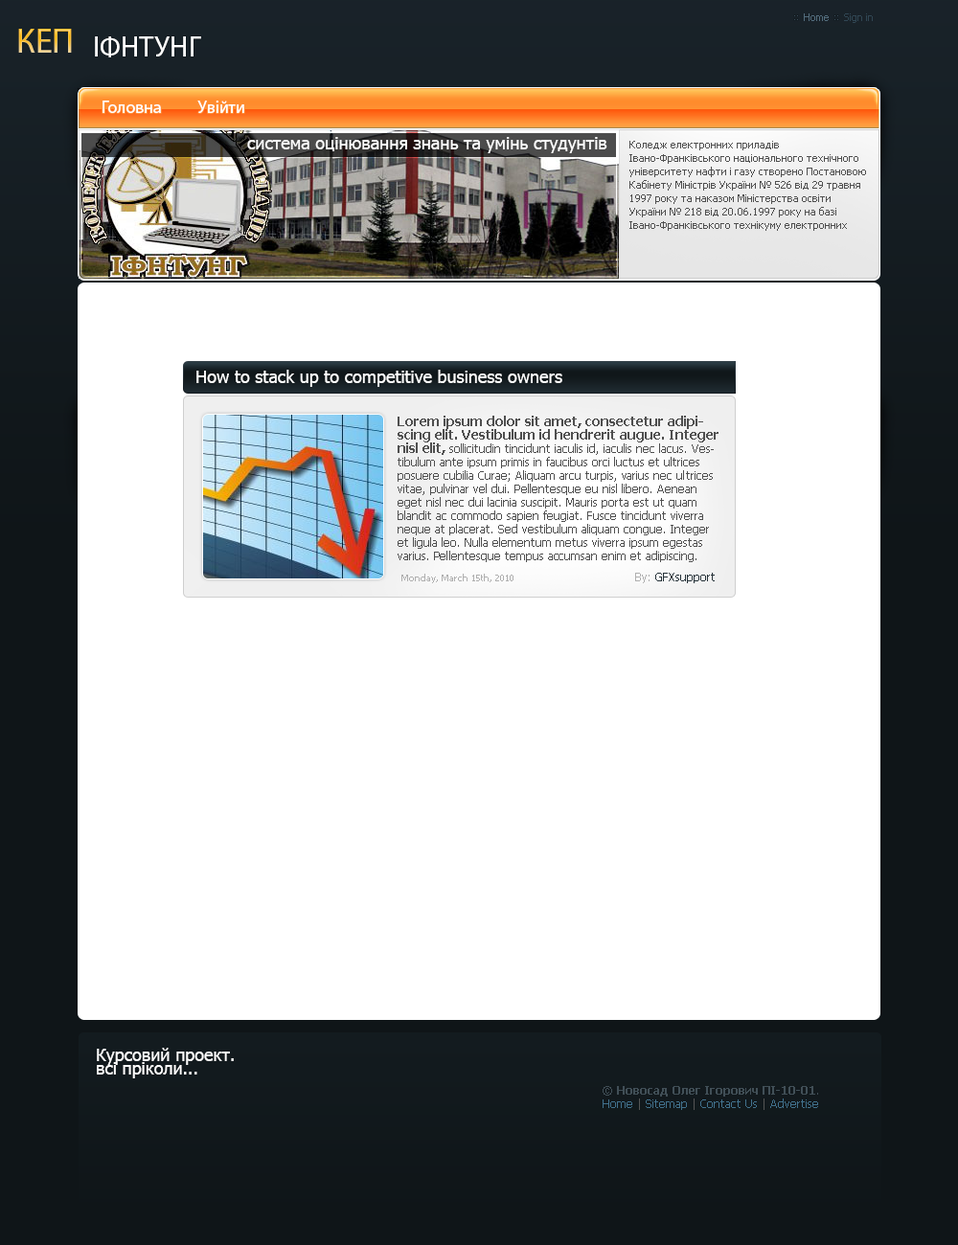
<style>
.page{position:relative;width:958px;height:1245px;background:#ffffff}
.page>*{position:absolute;margin:0}
.t1{font:10.5px "Tahoma";color:#304653}
.t2{font:10.5px "Tahoma";color:#536d7d}
.t3{font:34.5px "MyriadPro-Regular"}
.t4{font:28.7px "MyriadPro-Regular";color:#ffffff}
.t5{font:17.2px "MyriadPro-Regular";color:#ffffff}
.t6{font:17.2px "Tahoma";color:#fefefe}
.t7{font:10.5px/13.4px "Tahoma";color:#4f4f4f}
.t8{font:11.5px/13.4px "Tahoma";color:#4f4f4f}
.t9{font:13.4px/13.4px "Tahoma-Bold";color:#4f4f4f}
.t10{font:9.6px "Tahoma";color:#afafaf}
.t11{font:11.5px "Tahoma";color:#afafaf}
.t12{font:11.5px "Tahoma";color:#253138}
.t13{font:17.2px/13.4px "Tahoma";color:#fefefe}
.t14{font:11.5px/13.4px "Tahoma-Bold";color:#414f57}
.t15{font:11.5px/13.4px "Tahoma";color:#414f57}
.t16{font:11.5px/13.4px "Tahoma";color:#41718d}
.t17{font:11.5px/13.4px "Tahoma";color:#555555}
</style>
<div class="page">
<p class="t1" style="left:804px;top:13px;width:68px;height:10px"><span class="t2">Home</span>     Sign in</p>
<p class="t3" style="left:18px;top:29px;width:54px;height:24px">КЕП</p>
<p class="t4" style="left:95px;top:36px;width:106px;height:21px">ІФНТУНГ</p>
<p class="t5" style="left:102px;top:101px;width:142px;height:12px">Головна          Увійти</p>
<p class="t6" style="left:247px;top:137px;width:360px;height:16px">система оцінювання знань та умінь студунтів</p>
<p class="t7" style="left:629px;top:141px;width:237px;height:90px">Коледж електронних приладів Івано-Франківського національного технічного університету нафти і газу створено Постановою Кабінету Міністрів України № 526 від 29 травня 1997 року та наказом Міністерства освіти України № 218 від 20.06.1997 року на базі Івано-Франківського технікуму електронних приладів, який ліквідовано.</p>
<p class="t6" style="left:196px;top:370px;width:366px;height:17px">How to stack up to competitive business owners</p>
<p class="t8" style="left:397px;top:416px;width:321px;height:146px"><span class="t9">Lorem ipsum dolor sit amet, consectetur adipiscing elit. Vestibulum id hendrerit augue. Integer nisl elit, </span>sollicitudin tincidunt iaculis id, iaculis nec lacus. Vestibulum ante ipsum primis in faucibus orci luctus et ultrices posuere cubilia Curae; Aliquam arcu turpis, varius nec ultrices vitae, pulvinar vel dui. Pellentesque eu nisl libero. Aenean eget nisl nec dui lacinia suscipit. Mauris porta est ut quam blandit ac commodo sapien feugiat. Fusce tincidunt viverra neque at placerat. Sed vestibulum aliquam congue. Integer et ligula leo. Nulla elementum metus viverra ipsum egestas varius. Pellentesque tempus accumsan enim et adipiscing. Phasellus eget lobortis eros. <br><br>egestas lobortis diam, id luctus orci malesuada sed. Suspendisse venenatis tincidunt elit, at viverra justo suscipit vitae.</p>
<p class="t10" style="left:401px;top:573px;width:313px;height:10px">Monday, March 15th, 2010                                          <span class="t11">By: </span><span class="t12">GFXsupport</span></p>
<p class="t13" style="left:97px;top:1048px;width:137px;height:30px">Курсовий проект.<br>всі пріколи...</p>
<p class="t14" style="left:602px;top:1086px;width:216px;height:24px;text-align:center"><span class="t15">© </span>Новосад Олег Ігорович ПІ-10-01<span class="t15">.<br></span><span class="t16">Home</span><span class="t17"> | </span><span class="t16">Sitemap</span><span class="t17"> | </span><span class="t16">Contact Us</span><span class="t17"> | </span><span class="t16">Advertise</span></p>
</div>
